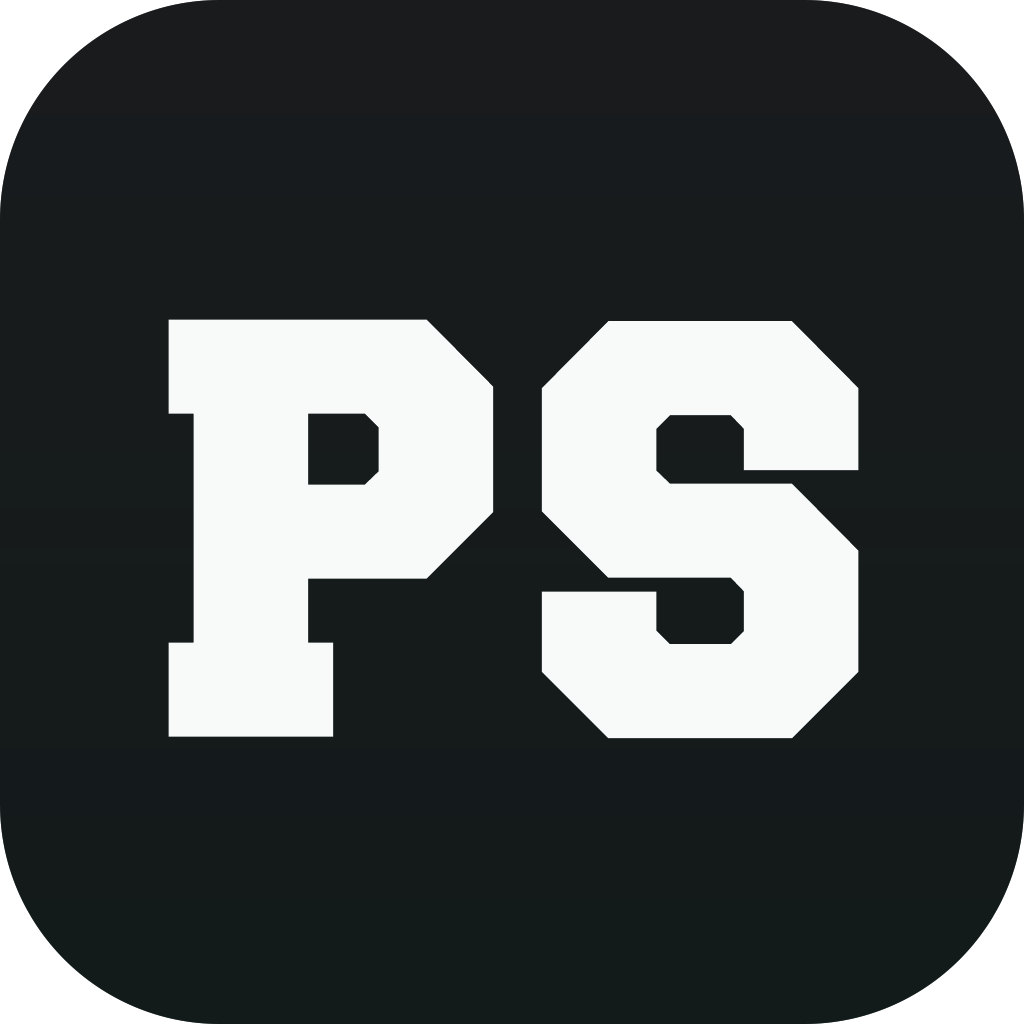
<style>
.page{position:relative;width:1024px;height:1024px}
.page>*{position:absolute;margin:0}
.t1{font:500px "Freshman";letter-spacing:-0.015em;color:#f8fafa}
</style>
<div class="page">
<p class="t1" style="left:168px;top:319px;width:326px;height:418px">P</p>
<p class="t1" style="left:541px;top:321px;width:318px;height:418px">S</p>
</div>
